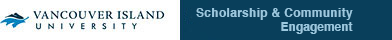
<style>
.page{position:relative;width:392px;height:40px;background:#093f5b}
.page>*{position:absolute;margin:0}
.t1{font:12px "Helvetica-Bold";letter-spacing:0.025em;color:#9bc8df}
.t2{font:12px "Helvetica-Bold";color:#9bc8df}
</style>
<div class="page">
<p class="t1" style="left:196px;top:8px;width:157px;height:26px;text-align:right">Scholarship &amp; Community<br><span class="t2">Engagement</span></p>
</div>
